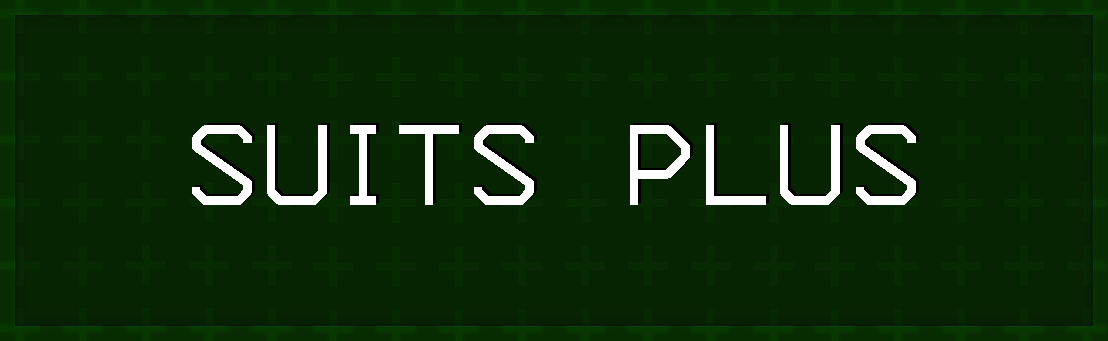
<style>
.page{position:relative;width:1108px;height:341px;background:#072402}
.page>*{position:absolute;margin:0}
.t1{font:145px "3270-Regular";color:#ffffff}
</style>
<div class="page">
<p class="t1" style="left:192px;top:125px;width:724px;height:80px">SUITS PLUS</p>
</div>
